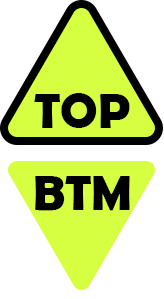
<style>
.page{position:relative;width:164px;height:299px;background:#ffffff}
.page>*{position:absolute;margin:0}
.t1{font:50px "BerlinSansFBDemi-Bold";color:#000000}
</style>
<div class="page">
<p class="t1" style="left:34px;top:93px;width:96px;height:35px">TOP</p>
<p class="t1" style="left:35px;top:176px;width:95px;height:35px">BTM</p>
</div>
